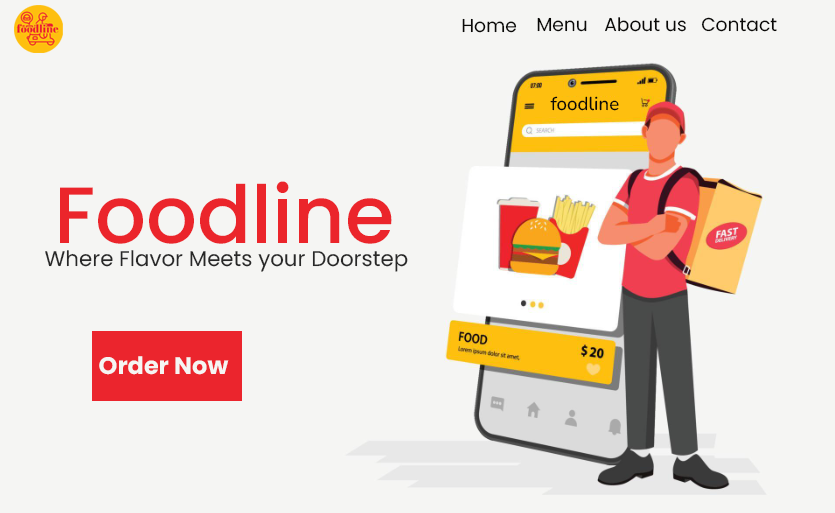
<style>
.page{position:relative;width:835px;height:513px;background:#f5f5f3}
.page>*{position:absolute;margin:0}
.t1{font:18.7px "Poppins-Regular";color:#0a0907}
.t2{font:18.7px "Nunito-Medium";color:#0b0908}
.t3{font:80px "Poppins-Medium";color:#eb252b}
.t4{font:21.3px "Poppins-Regular";color:#282828}
.t5{font:24px "Poppins-Bold";color:#f5f5f3}
</style>
<div class="page">
<p class="t1" style="left:537px;top:17px;width:50px;height:15px">Menu</p>
<p class="t1" style="left:605px;top:17px;width:81px;height:15px">About us</p>
<p class="t1" style="left:701px;top:17px;width:76px;height:15px">Contact</p>
<p class="t1" style="left:462px;top:18px;width:55px;height:15px">Home</p>
<p class="t2" style="left:550px;top:96px;width:69px;height:15px">foodline</p>
<p class="t3" style="left:60px;top:181px;width:332px;height:63px">Foodline</p>
<p class="t4" style="left:45px;top:250px;width:363px;height:22px">Where Flavor Meets your Doorstep</p>
<p class="t5" style="left:99px;top:356px;width:130px;height:19px">Order Now</p>
</div>
